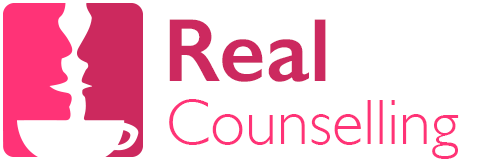
<style>
.page{position:relative;width:500px;height:160px;background:#ffffff}
.page>*{position:absolute;margin:0}
.t1{font:90px "GillSans-SemiBold";color:#cc295f}
.t2{font:65px "GillSans-Light";color:#ff3377}
</style>
<div class="page">
<p class="t1" style="left:169px;top:19px;width:157px;height:63px">Real</p>
<p class="t2" style="left:169px;top:99px;width:290px;height:60px">Counselling</p>
</div>
